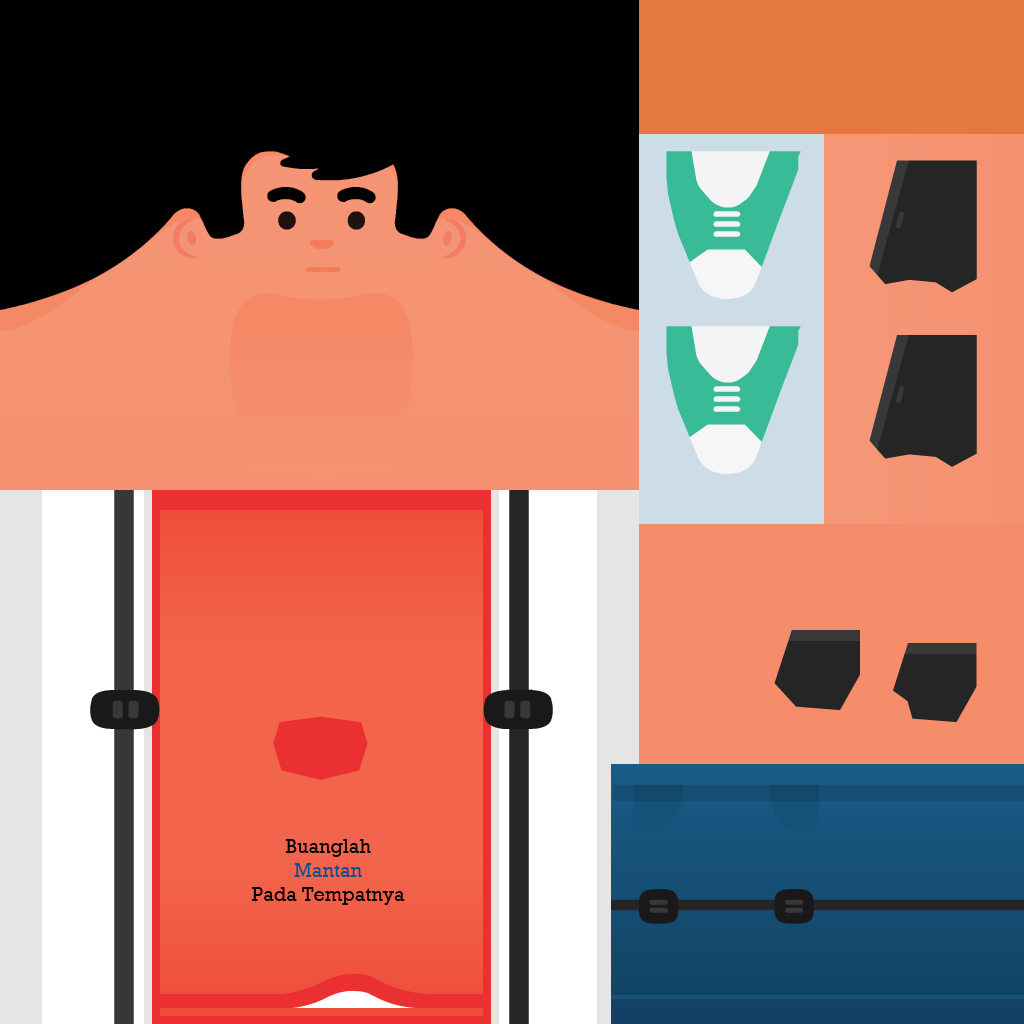
<style>
.page{position:relative;width:1024px;height:1024px}
.page>*{position:absolute;margin:0}
.t1{font:20px "Rockwell";color:#000000}
.t2{font:20px "Rockwell";color:#104f8a}
</style>
<div class="page">
<p class="t1" style="left:252px;top:839px;width:153px;height:66px;text-align:center">Buanglah<br><span class="t2">Mantan<br></span>Pada Tempatnya</p>
</div>
